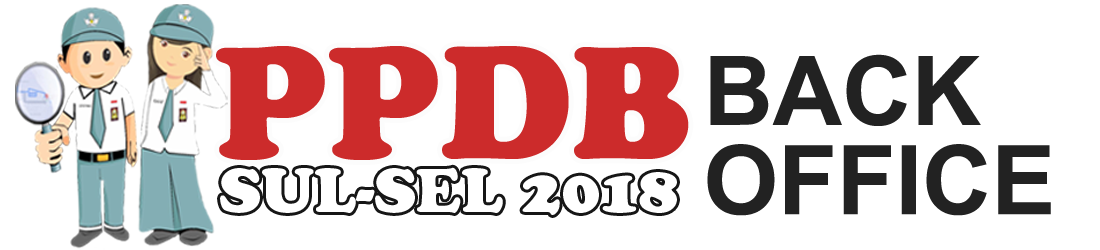
<style>
.page{position:relative;width:1100px;height:250px;background:#ffffff}
.page>*{position:absolute;margin:0}
.t1{font:165px "CooperBlack";color:#cc2b2b}
.t2{font:96px/89.3px "Arial-BoldMT";color:#222222}
.t3{font:62px "CooperBlackStd";color:#ffffff}
</style>
<div class="page">
<p class="t1" style="left:216px;top:46px;width:473px;height:114px">PPDB</p>
<p class="t2" style="left:707px;top:54px;width:344px;height:162px">BACK<br>OFFICE</p>
<p class="t3" style="left:220px;top:167px;width:457px;height:48px">SUL-SEL 2018</p>
</div>
